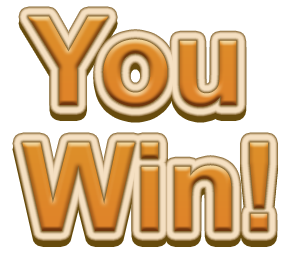
<style>
.page{position:relative;width:300px;height:260px;background:#ffffff}
.page>*{position:absolute;margin:0}
.t1{font:123.2px "Arial-BoldMT";scale:0.97 1}
.t2{font:123.2px "Arial-BoldMT";color:#dd8629;scale:0.97 1}
</style>
<div class="page">
<p class="t1" style="left:28px;top:16px;width:209px;height:91px">You</p>
<p class="t1" style="left:28px;top:22px;width:209px;height:91px">You</p>
<p class="t1" style="left:22px;top:148px;width:246px;height:89px">Win!</p>
<p class="t2" style="left:22px;top:142px;width:246px;height:89px">Win!</p>
</div>
